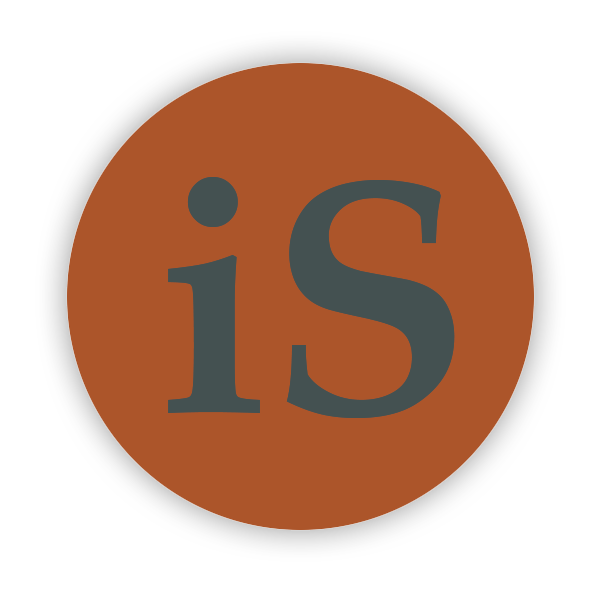
<style>
.page{position:relative;width:600px;height:600px;background:#ac552a}
.page>*{position:absolute;margin:0}
.t1{font:333.9px "Palatino-Bold";color:#445151}
</style>
<div class="page">
<p class="t1" style="left:168px;top:177px;width:287px;height:241px">iS</p>
</div>
